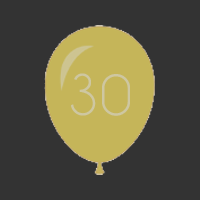
<style>
.page{position:relative;width:200px;height:200px;background:#333333}
.page>*{position:absolute;margin:0}
.t1{font:52.5px "CaviarDreams";color:#cec7a1}
</style>
<div class="page">
<p class="t1" style="left:71px;top:73px;width:59px;height:43px">30</p>
</div>
